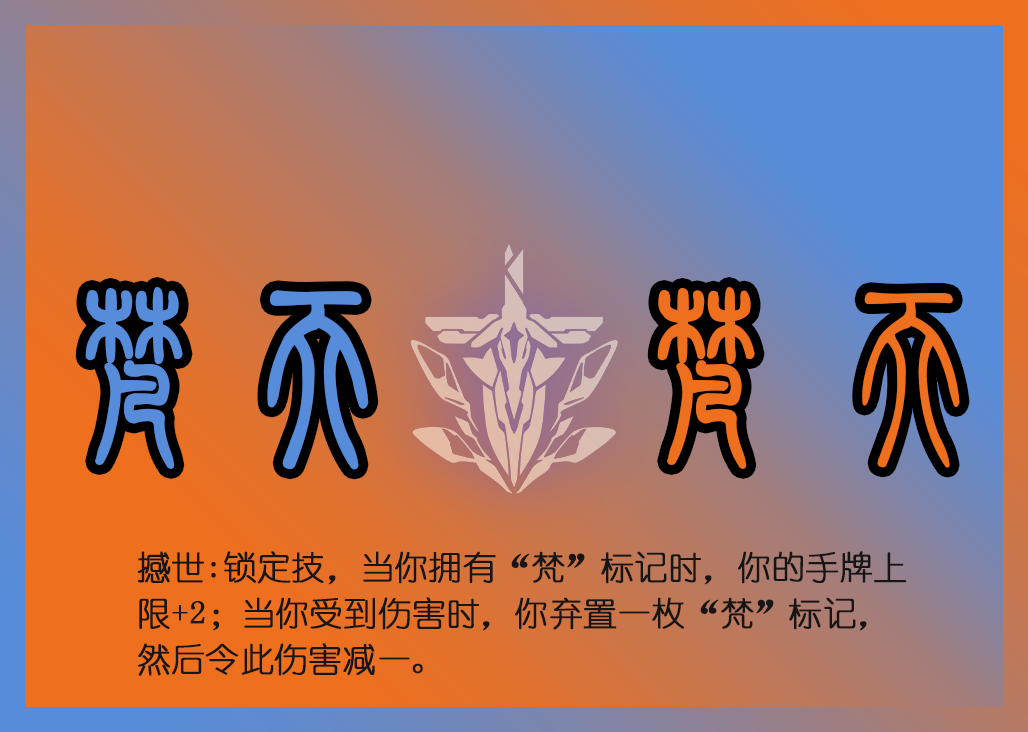
<style>
.page{position:relative;width:1028px;height:732px}
.page>*{position:absolute;margin:0}
.t1{font:200px "FZXZTFW--GB1-0";letter-spacing:-0.1em;color:#578cda;font-weight:bold}
.t2{font:200px "FZXZTFW--GB1-0";color:#ee6f1e;font-weight:bold}
.t3{font:33.3px/45.8px "YouYuan";color:#161616;font-weight:bold}
</style>
<div class="page">
<p class="t1" style="left:85px;top:287px;width:284px;height:183px">梵天</p>
<p class="t2" style="left:657px;top:287px;width:303px;height:182px">梵天</p>
<p class="t3" style="left:138px;top:551px;width:769px;height:125px">撼世:锁定技，当你拥有“梵”标记时，你的手牌上限+2；当你受到伤害时，你弃置一枚“梵”标记，然后令此伤害减一。</p>
</div>
